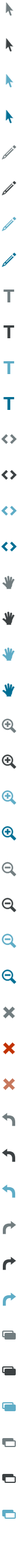
<style>
.page{position:relative;width:18px;height:1568px;background:#ffffff}
.page>*{position:absolute;margin:0}
.t1{font:17.9px "HelveticaNeue-Bold";color:#727d80}
.t2{font:17.9px "HelveticaNeue-Bold";color:#3c4143}
.t3{font:17.9px "HelveticaNeue-Bold";color:#5eacc6}
.t4{font:17.9px "HelveticaNeue-Bold";color:#006f94}
</style>
<div class="page">
<p class="t1" style="left:3px;top:290px;width:12px;height:12px">T</p>
<p class="t2" style="left:3px;top:325px;width:12px;height:13px">T</p>
<p class="t3" style="left:3px;top:361px;width:12px;height:13px">T</p>
<p class="t4" style="left:3px;top:397px;width:12px;height:13px">T</p>
</div>
